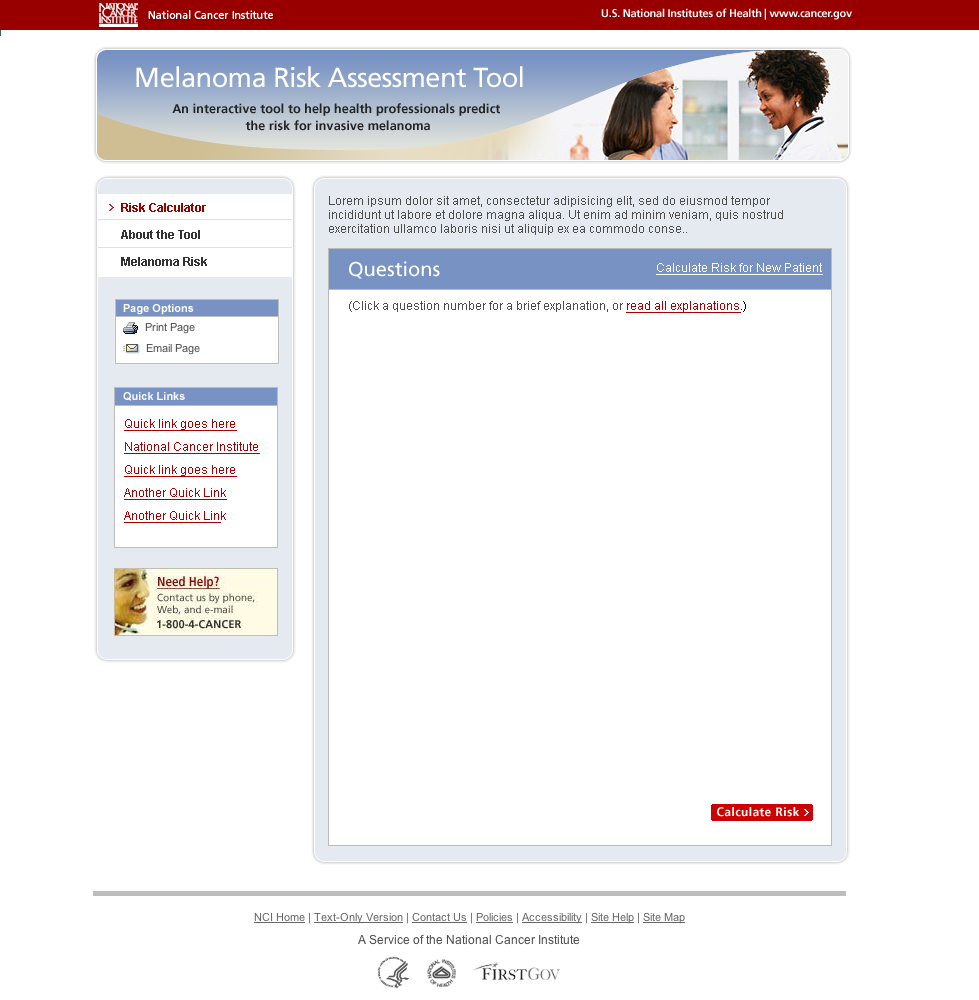
<style>
.page{position:relative;width:979px;height:1000px;background:#ffffff}
.page>*{position:absolute;margin:0}
.t1{font:11px "FrutigerLTStd-Bold";letter-spacing:-0.025em;color:#ffffff}
.t2{font:27.5px "FrutigerLTStd-Roman";letter-spacing:-0.025em;color:#ffffff}
.t3{font:12.5px/23px "FrutigerLTStd-Bold";letter-spacing:0.01em;color:#232323}
.t4{font:12.5px/17px "FrutigerLTStd-Bold";letter-spacing:0.01em;color:#232323}
.t5{font:12px/14px "ArialMT";color:#4d4d4d}
.t6{font:11.5px/27px "Arial-BoldMT";color:#333333}
.t7{font:11.5px/26.5px "Arial-BoldMT";color:#980000}
.t8{font:20px "FrutigerLTStd-Roman";color:#ffffff}
.t9{font:11.5px "ArialMT";color:#ffffff;text-decoration:underline}
.t10{font:11px "Arial-BoldMT";color:#ffffff}
.t11{font:12px "ArialMT";color:#4d4d4d}
.t12{font:12px "ArialMT";color:#a90101;text-decoration:underline}
.t13{font:12px "ArialMT";color:#000000}
.t14{font:11.5px/23px "ArialMT";color:#a90101;text-decoration:underline}
.t15{font:11.5px/23px "ArialMT";color:#a90101}
.t16{font:12px "FrutigerLTStd-Bold";letter-spacing:0.035em;color:#ffffff}
</style>
<div class="page">
<p class="t1" style="left:601px;top:8px;width:251px;height:12px">U.S. National Institutes of Health | www.cancer.gov</p>
<p class="t2" style="left:136px;top:66px;width:387px;height:22px">Melanoma Risk Assessment Tool</p>
<p class="t3" style="left:172px;top:103px;width:328px;height:28px;text-align:center">An interactive tool to help health professionals predict <br><span class="t4">the risk for invasive melanoma</span></p>
<p class="t5" style="left:329px;top:196px;width:454px;height:39px">Lorem ipsum dolor sit amet, consectetur adipisicing elit, sed do eiusmod tempor <br>incididunt ut labore et dolore magna aliqua. Ut enim ad minim veniam, quis nostrud <br>exercitation ullamco laboris nisi ut aliquip ex ea commodo conse..</p>
<p class="t6" style="left:121px;top:203px;width:86px;height:63px"><span class="t7">Risk Calculator<br></span>About the Tool<br>Melanoma Risk</p>
<p class="t8" style="left:349px;top:261px;width:91px;height:18px">Questions</p>
<p class="t9" style="left:656px;top:263px;width:167px;height:12px">Calculate Risk for New Patient</p>
<p class="t10" style="left:123px;top:304px;width:71px;height:11px">Page Options</p>
<p class="t11" style="left:349px;top:301px;width:397px;height:12px">(Click a question number for a brief explanation, or <span class="t12">read all explanations</span><span class="t13">.)</span></p>
<p class="t10" style="left:123px;top:392px;width:62px;height:9px">Quick Links</p>
<p class="t14" style="left:124px;top:419px;width:136px;height:104px">Quick link goes here<br>National Cancer Institute<br>Quick link goes here<br>Another Quick Link<br>Another Quick Lin<span class="t15">k</span></p>
<p class="t16" style="left:717px;top:807px;width:83px;height:10px">Calculate Risk</p>
</div>
